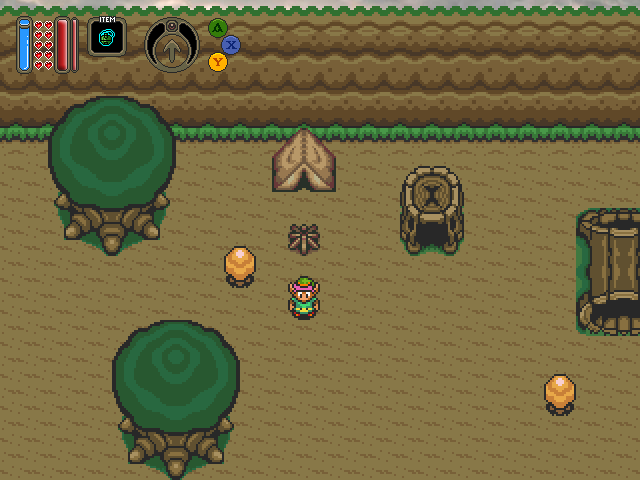
<style>
.page{position:relative;width:640px;height:480px;background:#887848}
.page>*{position:absolute;margin:0}
.t1{font:14px "CeltGael";color:#003100;font-weight:bold}
.t2{font:10px "CelticGaramondthe2nd";color:#0e2575;font-weight:bold}
.t3{font:10px "CelticGaramondthe2nd";color:#b84600;font-weight:bold}
</style>
<div class="page">
<p class="t1" style="left:212px;top:23px;width:11px;height:9px">A</p>
<p class="t2" style="left:226px;top:41px;width:11px;height:8px">X</p>
<p class="t3" style="left:213px;top:58px;width:10px;height:8px">Y</p>
</div>
